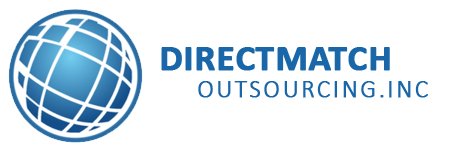
<style>
.page{position:relative;width:450px;height:150px;background:#ffffff}
.page>*{position:absolute;margin:0}
.t1{font:37px "Calibri-Bold";color:#1967a9;font-weight:bold}
.t2{font:25px "Calibri-Light";letter-spacing:0.08em;color:#1967a9;font-weight:bold}
</style>
<div class="page">
<p class="t1" style="left:161px;top:47px;width:229px;height:24px">DIRECTMATCH</p>
<p class="t2" style="left:198px;top:81px;width:230px;height:17px">OUTSOURCING.INC</p>
</div>
